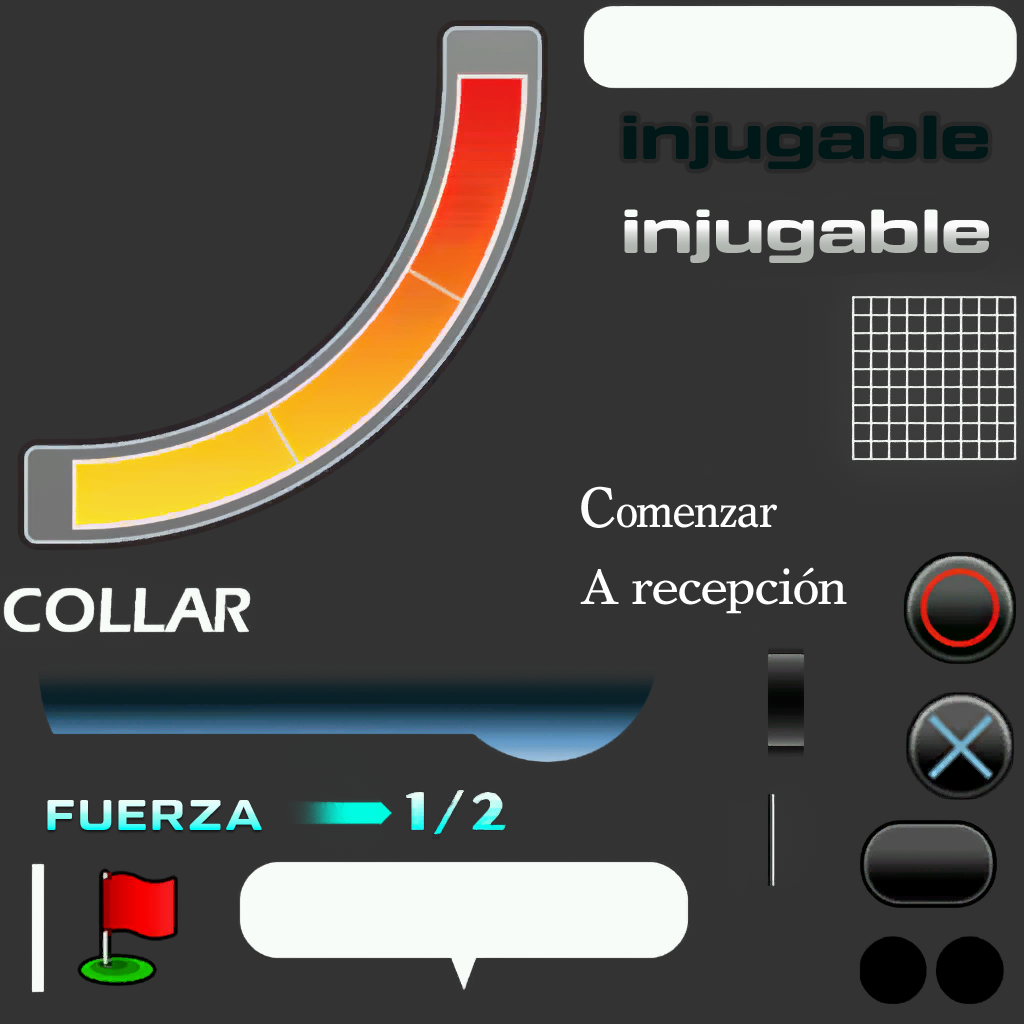
<style>
.page{position:relative;width:1024px;height:1024px;background:#333333}
.page>*{position:absolute;margin:0}
.t1{font:61.9px "TacticRound-Bld";color:#001818;scale:1.26 1}
.t2{font:61.9px "TacticRound-Bld";scale:1.26 1}
.t3{font:46.9px "TimesEuropaLTStd-Roman";letter-spacing:-0.02em;color:#fefefe;scale:0.91 1}
.t4{font:57px "TimesEuropaLTStd-Roman";letter-spacing:-0.02em;color:#fefefe;scale:0.91 1}
.t5{font:49.1px "TimesEuropaLTStd-Roman";letter-spacing:-0.02em;color:#fefefe}
.t6{font:42.7px "TacticRound-Bld";letter-spacing:0.08em;scale:1.06 1}
</style>
<div class="page">
<p class="t1" style="left:623px;top:115px;width:365px;height:54px">injugable</p>
<p class="t2" style="left:624px;top:209px;width:365px;height:54px">injugable</p>
<p class="t3" style="left:581px;top:486px;width:196px;height:42px"><span class="t4">C</span>omenzar</p>
<p class="t5" style="left:580px;top:567px;width:267px;height:47px">A recepción</p>
<p class="t6" style="left:47px;top:800px;width:215px;height:30px">FUERZA</p>
</div>
